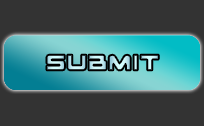
<style>
.page{position:relative;width:204px;height:126px;background:#333333}
.page>*{position:absolute;margin:0}
.t1{font:30px "SpaceRangerBold"}
</style>
<div class="page">
<p class="t1" style="left:46px;top:54px;width:19px;height:17px">S</p>
<p class="t1" style="left:88px;top:54px;width:19px;height:17px">b</p>
<p class="t1" style="left:108px;top:54px;width:23px;height:17px">m</p>
<p class="t1" style="left:133px;top:54px;width:5px;height:17px">i</p>
</div>
